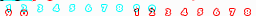
<style>
.page{position:relative;width:256px;height:16px;background:#fcfcfc}
.page>*{position:absolute;margin:0}
.t1{font:8px "LithosPro-Black";color:#fffcfc}
.t2{font:8px "LithosPro-Black"}
</style>
<div class="page">
<p class="t1" style="left:6px;top:5px;width:4px;height:6px">1</p>
<p class="t2" style="left:21px;top:5px;width:6px;height:6px">2</p>
<p class="t1" style="left:38px;top:5px;width:5px;height:7px">3</p>
<p class="t1" style="left:53px;top:4px;width:6px;height:7px">4</p>
<p class="t1" style="left:70px;top:5px;width:5px;height:6px">5</p>
<p class="t1" style="left:86px;top:4px;width:5px;height:7px">6</p>
<p class="t1" style="left:102px;top:5px;width:5px;height:7px">7</p>
<p class="t1" style="left:117px;top:5px;width:5px;height:6px">8</p>
<p class="t1" style="left:134px;top:5px;width:5px;height:7px">9</p>
<p class="t2" style="left:149px;top:5px;width:6px;height:6px">0</p>
</div>
